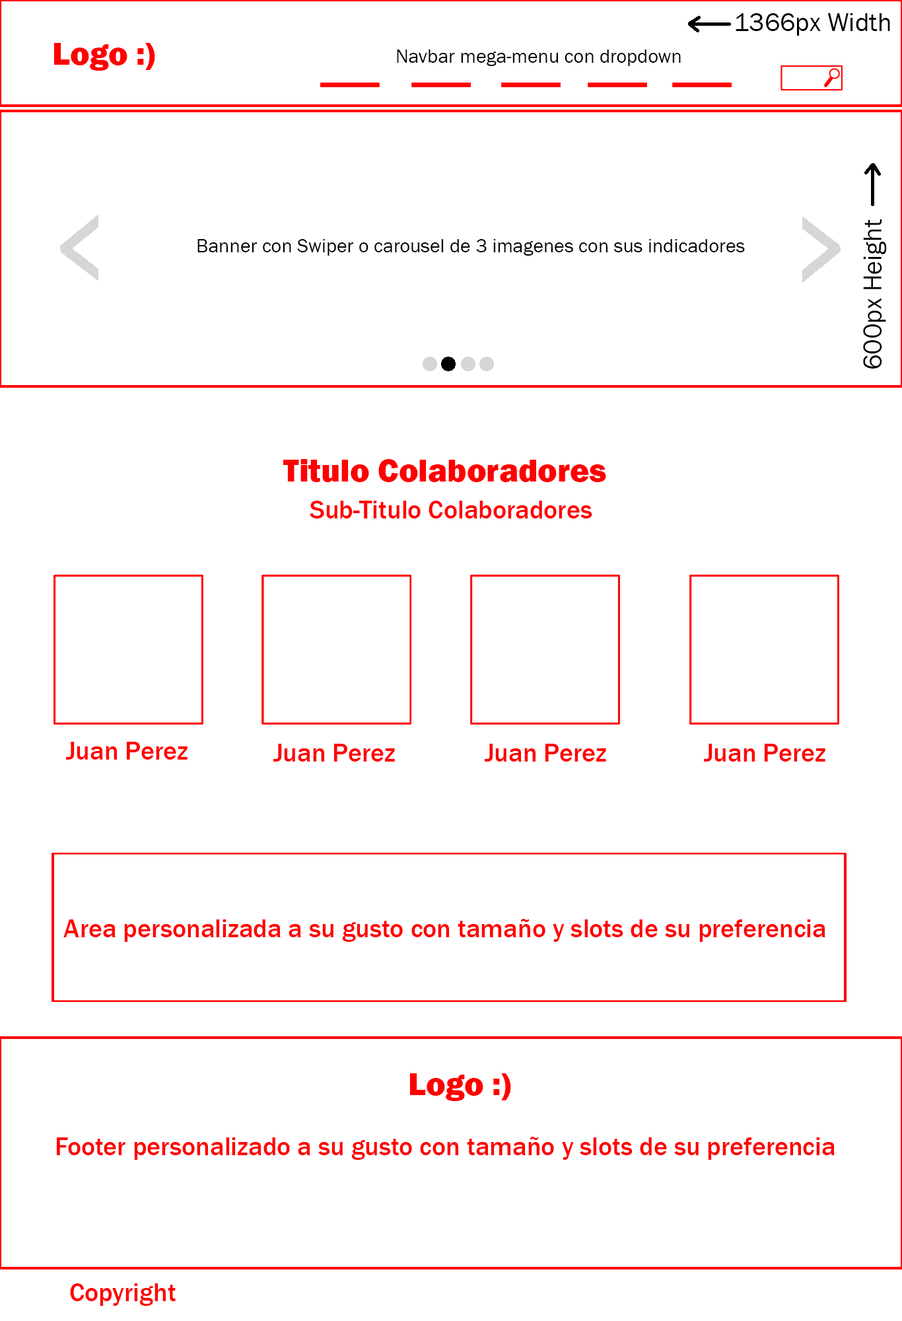
<style>
.page{position:relative;width:902px;height:1321px;background:#ffffff}
.page>*{position:absolute;margin:0}
.t1{font:26.4px "FranklinGothic-Book";color:#000000}
.t2{font:33px "FranklinGothic-Heavy";color:#ff0000}
.t3{font:19.8px "FranklinGothic-Book";color:#000000}
.t4{font:26.7px "FranklinGothic-Book";color:#000000}
.t5{font:26.4px "FranklinGothic-Medium";color:#ff0000}
</style>
<div class="page">
<p class="t1" style="left:736px;top:13px;width:155px;height:23px">1366px Width</p>
<p class="t2" style="left:54px;top:43px;width:101px;height:28px">Logo :)</p>
<p class="t3" style="left:397px;top:50px;width:284px;height:16px">Navbar mega-menu con dropdown</p>
<p class="t4" style="left:863px;top:219px;width:24px;height:150px;rotate:-90deg">600px Height</p>
<p class="t3" style="left:198px;top:239px;width:547px;height:17px">Banner con Swiper o carousel de 3 imagenes con sus indicadores</p>
<p class="t2" style="left:283px;top:459px;width:323px;height:23px">Titulo Colaboradores</p>
<p class="t5" style="left:310px;top:501px;width:283px;height:18px">Sub-Titulo Colaboradores</p>
<p class="t5" style="left:66px;top:742px;width:122px;height:18px">Juan Perez</p>
<p class="t5" style="left:274px;top:744px;width:121px;height:18px">Juan Perez</p>
<p class="t5" style="left:485px;top:744px;width:121px;height:18px">Juan Perez</p>
<p class="t5" style="left:704px;top:744px;width:122px;height:18px">Juan Perez</p>
<p class="t5" style="left:63px;top:919px;width:763px;height:23px">Area personalizada a su gusto con tamaño y slots de su preferencia</p>
<p class="t2" style="left:410px;top:1074px;width:101px;height:27px">Logo :)</p>
<p class="t5" style="left:57px;top:1137px;width:778px;height:23px">Footer personalizado a su gusto con tamaño y slots de su preferencia</p>
<p class="t5" style="left:70px;top:1284px;width:106px;height:22px">Copyright</p>
</div>
